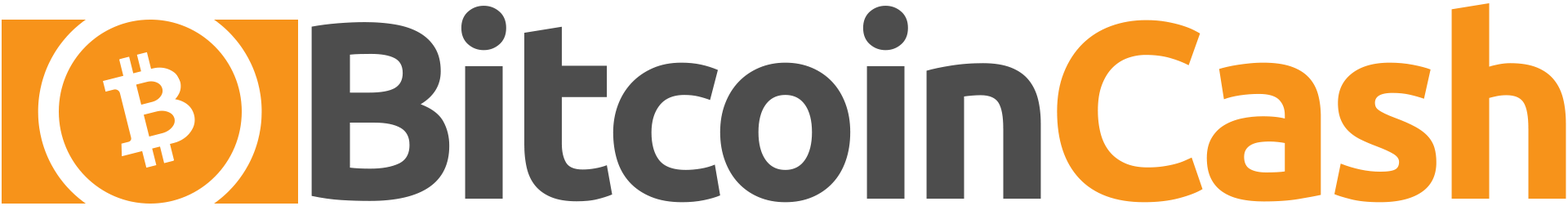
<style>
.page{position:relative;width:1568px;height:206px;background:#ffffff}
.page>*{position:absolute;margin:0}
.t1{font:251.5px "Ubuntu-Bold";letter-spacing:-0.05em;color:#4d4d4d}
.t2{font:251.5px "Ubuntu-Bold";letter-spacing:-0.05em;color:#f7931a}
</style>
<div class="page">
<p class="t1" style="left:311px;top:2px;width:1255px;height:201px">Bitcoin<span class="t2">Cash</span></p>
</div>
